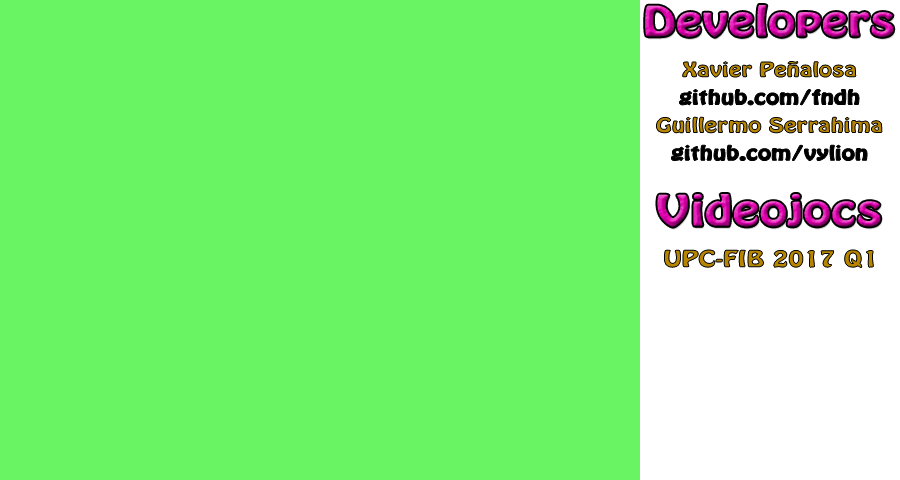
<style>
.page{position:relative;width:900px;height:480px;background:#69f463}
.page>*{position:absolute;margin:0}
.t1{font:36.3px "HoboStd";letter-spacing:0.02em;scale:1.33 1}
.t2{font:17.4px "HoboStd";letter-spacing:0.02em;color:#b78500;scale:1.33 1}
.t3{font:17.4px "HoboStd";letter-spacing:0.02em;color:#000000;scale:1.33 1}
.t4{font:37px "HoboStd";letter-spacing:0.02em;scale:1.33 1}
.t5{font:19.6px "HoboStd";letter-spacing:0.02em;color:#b78500;scale:1.33 1}
</style>
<div class="page">
<p class="t1" style="left:645px;top:5px;width:249px;height:32px">Developers</p>
<p class="t2" style="left:656px;top:61px;width:226px;height:100px;text-align:center">Xavier Peñalosa<br><span class="t3">github.com/fndh<br></span>Guillermo Serrahima<br><span class="t3">github.com/vylion</span></p>
<p class="t4" style="left:657px;top:194px;width:224px;height:33px">Videojocs</p>
<p class="t5" style="left:664px;top:250px;width:210px;height:18px">UPC-FIB 2017 Q1</p>
</div>
